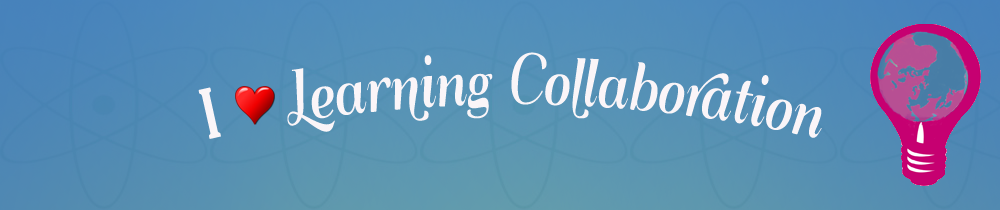
<style>
.page{position:relative;width:1000px;height:210px}
.page>*{position:absolute;margin:0}
.t1{font:64px "QumpellkaNo12";color:#faf5f8;scale:0.63 1}
.t2{font:24px "ArialMT";color:#faf5f8}
.t3{font:64px "BernardMT-Condensed";color:#faf5f8;scale:0.63 1}
</style>
<div class="page">
<p class="t1" style="left:198px;top:52px;width:624px;height:87px"><span class="t2"><br></span><span class="t3">I</span>    Learning Collaboration</p>
</div>
